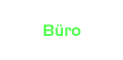
<style>
.page{position:relative;width:123px;height:60px;background:#ffffff}
.page>*{position:absolute;margin:0}
.t1{font:16px "AeroRegularSWFTE";color:#5cff58}
</style>
<div class="page">
<p class="t1" style="left:43px;top:24px;width:38px;height:12px">Büro</p>
</div>
